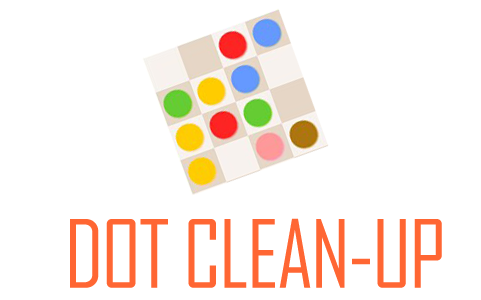
<style>
.page{position:relative;width:481px;height:300px;background:#ffffff}
.page>*{position:absolute;margin:0}
.t1{font:90px "AgencyFB-Reg";letter-spacing:-0.025em;color:#ff6633}
</style>
<div class="page">
<p class="t1" style="left:70px;top:218px;width:372px;height:70px">DOT CLEAN-UP</p>
</div>
